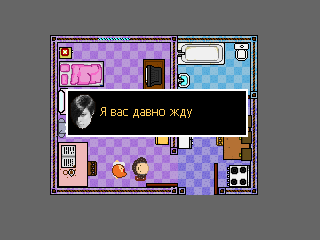
<style>
.page{position:relative;width:320px;height:240px;background:#666666}
.page>*{position:absolute;margin:0}
.t1{font:12px "Tahoma";color:#ffcd59}
</style>
<div class="page">
<p class="t1" style="left:100px;top:107px;width:92px;height:11px">Я вас давно жду</p>
</div>
